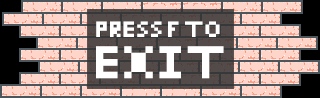
<style>
.page{position:relative;width:320px;height:98px;background:#ffd5ca}
.page>*{position:absolute;margin:0}
.t1{font:15.4px "OurQuinny";color:#ffffff;text-transform:uppercase;scale:1.11 1}
.t2{font:31.8px "OurQuinny";color:#ffffff;text-transform:uppercase;scale:1.11 1}
</style>
<div class="page">
<p class="t1" style="left:96px;top:21px;width:124px;height:16px">press f to</p>
<p class="t2" style="left:96px;top:46px;width:128px;height:33px">EXIT</p>
</div>
